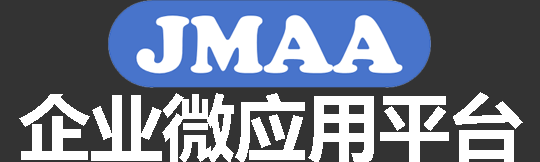
<style>
.page{position:relative;width:540px;height:162px;background:#333333}
.page>*{position:absolute;margin:0}
.t1{font:72px "MicrosoftYaHei-Bold";color:#ffffff}
</style>
<div class="page">
<p class="t1" style="left:19px;top:92px;width:504px;height:72px">企业微应用平台</p>
</div>
